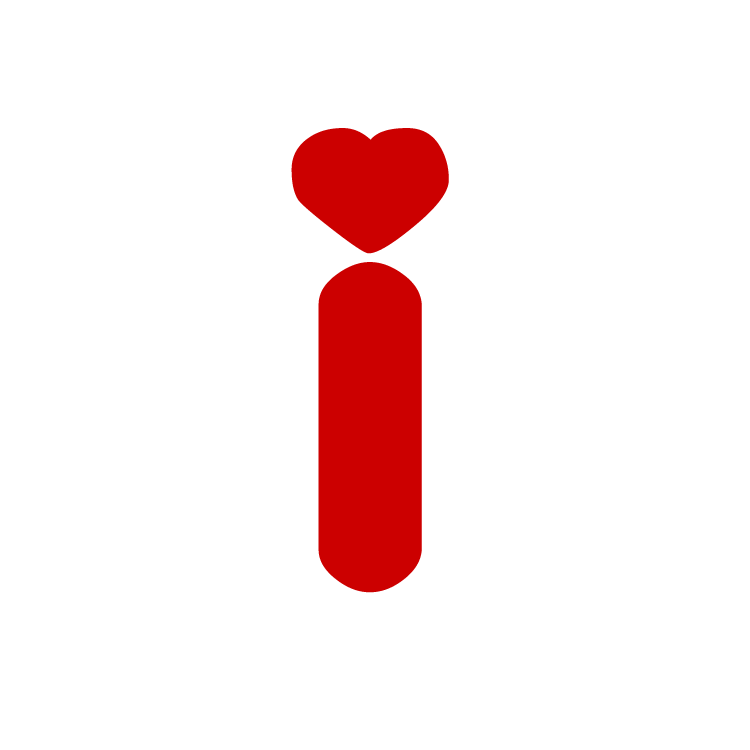
<style>
.page{position:relative;width:750px;height:750px;background:#ffffff}
.page>*{position:absolute;margin:0}
.t1{font:783.8px "Glamourgirl";letter-spacing:-0.01em;color:#cc0000}
</style>
<div class="page">
<p class="t1" style="left:291px;top:128px;width:158px;height:465px">i</p>
</div>
